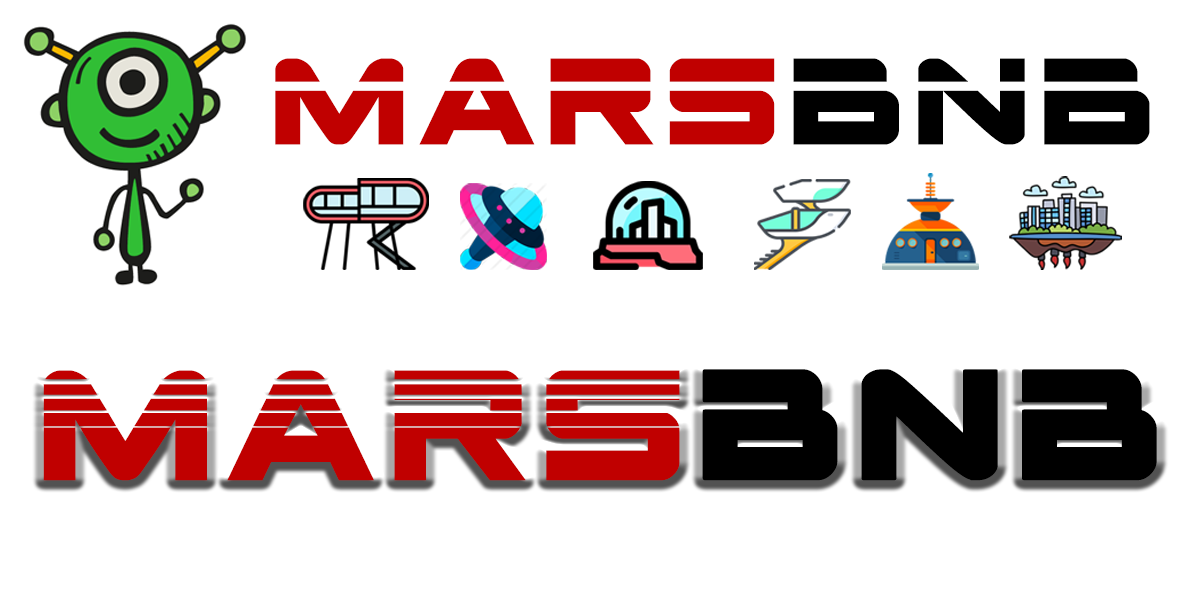
<style>
.page{position:relative;width:1200px;height:600px;background:#ffffff}
.page>*{position:absolute;margin:0}
.t1{font:170.9px "SpaceRangerLaser";letter-spacing:0.05em;color:#c00000}
.t2{font:170.9px "SpaceRangerLaser";letter-spacing:0.05em;color:#000000}
.t3{font:217.6px "SpaceRangerHalftone";letter-spacing:0.05em;color:#c00000}
.t4{font:217.6px "SpaceRangerBold";letter-spacing:0.05em;color:#000000}
</style>
<div class="page">
<p class="t1" style="left:275px;top:58px;width:875px;height:87px">Mars<span class="t2">BNB</span></p>
<p class="t3" style="left:43px;top:369px;width:1114px;height:112px">Mars<span class="t4">BNB</span></p>
</div>
